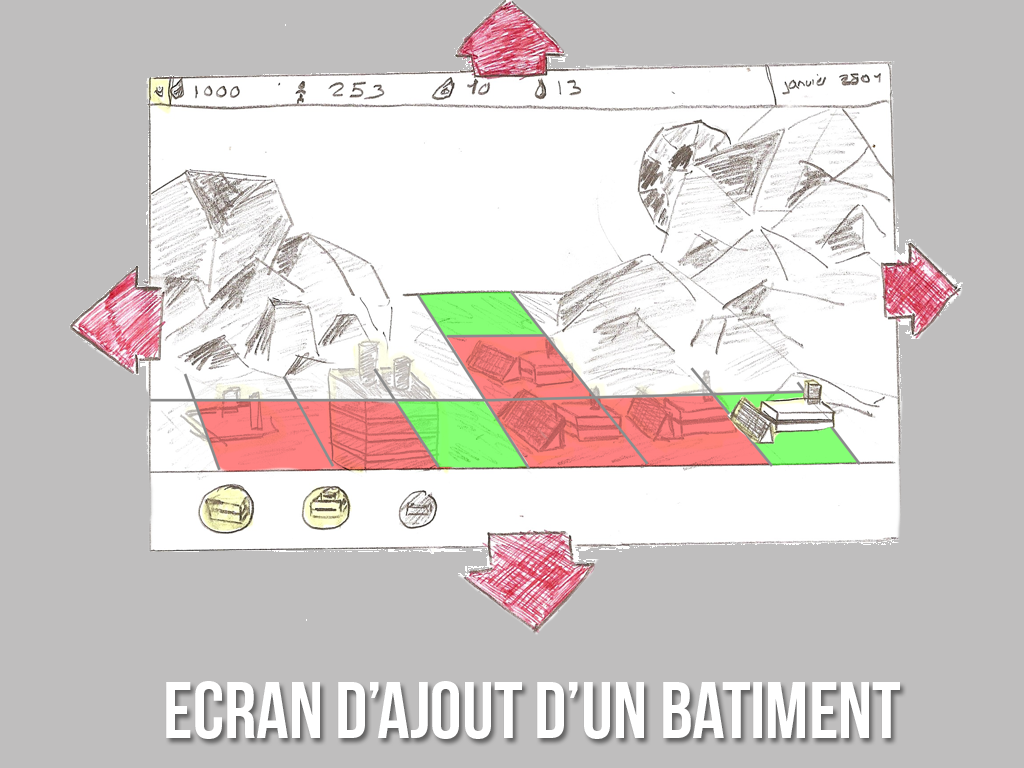
<style>
.page{position:relative;width:1024px;height:768px;background:#bfbebe}
.page>*{position:absolute;margin:0}
.t1{font:80px "BebasNeue";color:#ffffff;text-transform:uppercase}
</style>
<div class="page">
<p class="t1" style="left:166px;top:681px;width:734px;height:58px">Ecran d’ajout d’un batiment</p>
</div>
